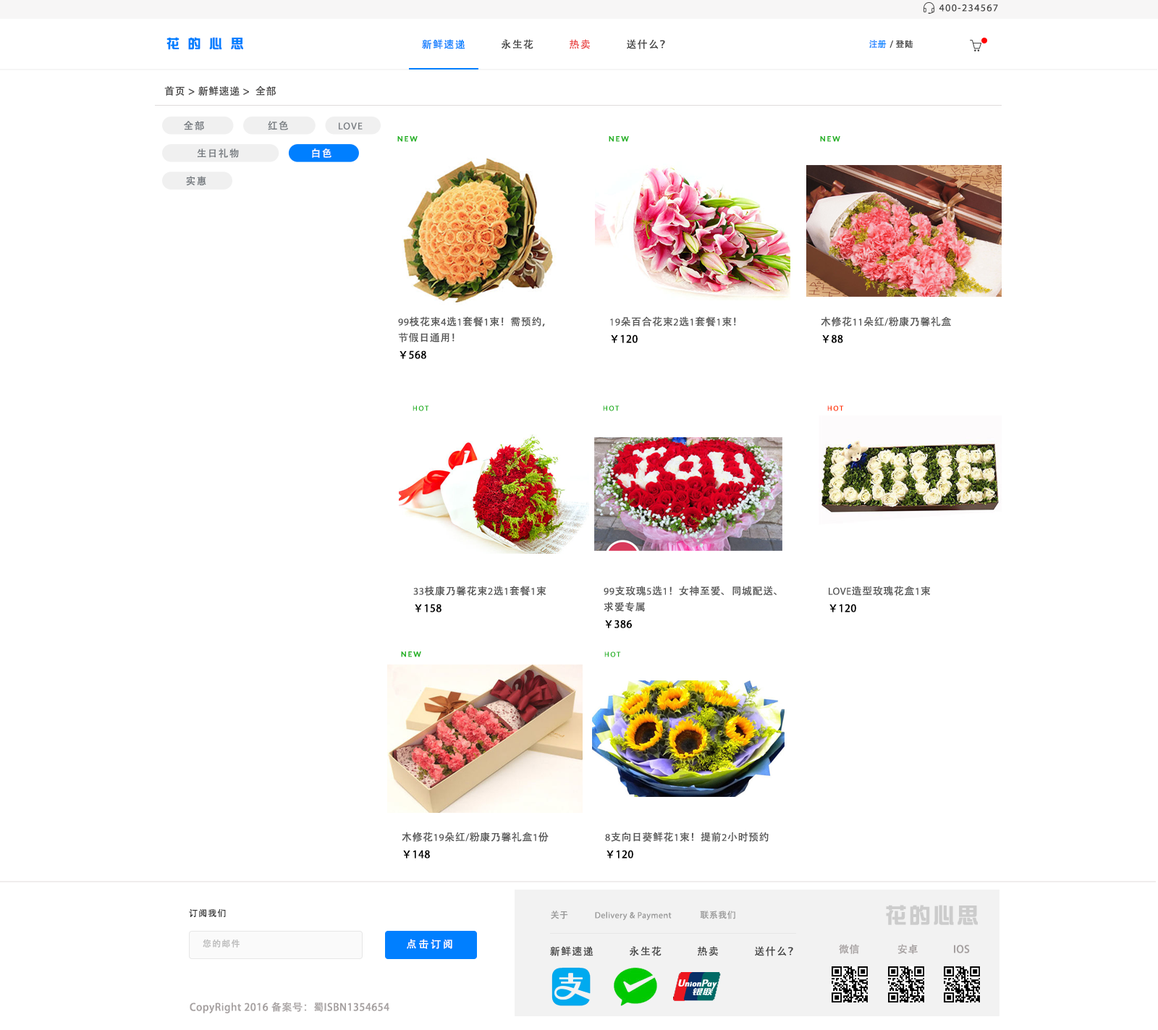
<style>
.page{position:relative;width:1158px;height:1030px;background:#ffffff}
.page>*{position:absolute;margin:0}
.t1{font:10.1px "MyriadPro-Regular";letter-spacing:0.1em;color:#444444}
.t2{font:13px "DFZongYi-Bd-80-Win-GB";letter-spacing:0.64em;color:#007fff}
.t3{font:10.1px "AdobeHeitiStd-Regular";letter-spacing:0.1em;color:#007fff}
.t4{font:10.1px "AdobeHeitiStd-Regular";letter-spacing:0.1em;color:#444444}
.t5{font:10.1px "AdobeHeitiStd-Regular";letter-spacing:0.1em;color:#eb4a4a;text-transform:uppercase}
.t6{font:8.7px "AdobeHeitiStd-Regular";letter-spacing:0.04em;color:#444444}
.t7{font:8.7px "AdobeHeitiStd-Regular";color:#007fff}
.t8{font:10.1px "AdobeHeitiStd-Regular";letter-spacing:0.04em;color:#474646}
.t9{font:9.9px "AdobeHeitiStd-Regular";letter-spacing:0.1em;color:#74797e;text-transform:uppercase}
.t10{font:9.9px "AdobeHeitiStd-Regular";letter-spacing:0.1em;color:#757a7f;text-transform:uppercase}
.t11{font:9.9px "MyriadPro-Regular";letter-spacing:0.1em;color:#757a7f;text-transform:uppercase}
.t12{font:7.2px "Lato-Bold";letter-spacing:0.2em;color:#21b221}
.t13{font:9.9px "AdobeHeitiStd-Regular";letter-spacing:0.1em;color:#fbfcfd;text-transform:uppercase}
.t14{font:10.1px/15.9px "AdobeHeitiStd-Regular";letter-spacing:0.04em;color:#555555}
.t15{font:10.1px/15.9px "MyriadPro-Regular";letter-spacing:0.04em;color:#555555}
.t16{font:10.1px/17.4px "AdobeHeitiStd-Regular";letter-spacing:0.04em;color:#000000}
.t17{font:7.2px "MyriadPro-Regular";letter-spacing:0.2em;color:#21b221}
.t18{font:7.2px "MyriadPro-Regular";letter-spacing:0.2em;color:#ff3300}
.t19{font:21.7px "DFZongYi-Bd-80-Win-GB";letter-spacing:0.1em;color:#cccccc}
.t20{font:8.7px "AdobeHeitiStd-Regular";letter-spacing:0.1em;color:#333333;text-transform:uppercase}
.t21{font:8.7px "MyriadPro-Regular";letter-spacing:0.04em;color:#999999}
.t22{font:8.7px "AdobeHeitiStd-Regular";letter-spacing:0.04em;color:#999999}
.t23{font:8.7px "AdobeHeitiStd-Regular";letter-spacing:0.1em;color:#bbbbbb}
.t24{font:10.1px "AdobeHeitiStd-Regular";letter-spacing:0.2em;color:#ffffff;text-transform:uppercase}
.t25{font:10.1px "AdobeHeitiStd-Regular";letter-spacing:0.04em;color:#a5a0a0}
</style>
<div class="page">
<p class="t1" style="left:939px;top:4px;width:59px;height:8px">400-234567</p>
<p class="t2" style="left:166px;top:37px;width:77px;height:13px">花的心思</p>
<p class="t3" style="left:422px;top:39px;width:243px;height:10px">新鲜速递           <span class="t4">永生花           </span><span class="t5">热卖           </span><span class="t4">送什么？</span></p>
<p class="t6" style="left:869px;top:40px;width:44px;height:8px"><span class="t7">注册 </span>/ 登陆</p>
<p class="t8" style="left:164px;top:86px;width:112px;height:10px">首页 &gt; 新鲜速递 &gt;  全部</p>
<p class="t9" style="left:184px;top:121px;width:20px;height:9px">全部</p>
<p class="t10" style="left:268px;top:121px;width:20px;height:9px">红色</p>
<p class="t11" style="left:339px;top:122px;width:24px;height:8px">LOVE</p>
<p class="t12" style="left:397px;top:136px;width:21px;height:6px">NEW</p>
<p class="t12" style="left:609px;top:136px;width:20px;height:6px">NEW</p>
<p class="t12" style="left:820px;top:136px;width:20px;height:6px">NEW</p>
<p class="t10" style="left:197px;top:148px;width:42px;height:10px">生日礼物</p>
<p class="t13" style="left:312px;top:148px;width:19px;height:10px">白色</p>
<p class="t10" style="left:186px;top:176px;width:20px;height:10px">实惠</p>
<p class="t14" style="left:398px;top:316px;width:147px;height:43px"><span class="t15">99</span>枝花束<span class="t15">4</span>选<span class="t15">1</span>套餐<span class="t15">1</span>束！需预约，<br>节假日通用！<br><span class="t16">￥568</span></p>
<p class="t14" style="left:610px;top:316px;width:126px;height:27px"><span class="t15">19</span>朵百合花束<span class="t15">2</span>选<span class="t15">1</span>套餐<span class="t15">1</span>束！<br><span class="t16">￥120</span></p>
<p class="t14" style="left:821px;top:316px;width:130px;height:27px">木修花<span class="t15">11</span>朵红<span class="t15">/</span>粉康乃馨礼盒<br><span class="t16">￥88</span></p>
<p class="t17" style="left:413px;top:405px;width:16px;height:6px">HOT</p>
<p class="t17" style="left:603px;top:405px;width:16px;height:6px">HOT</p>
<p class="t18" style="left:827px;top:405px;width:17px;height:6px">HOT</p>
<p class="t14" style="left:413px;top:585px;width:133px;height:27px"><span class="t15">33</span>枝康乃馨花束<span class="t15">2</span>选<span class="t15">1</span>套餐<span class="t15">1</span>束<br><span class="t16">￥158</span></p>
<p class="t14" style="left:604px;top:585px;width:173px;height:43px"><span class="t15">99</span>支玫瑰<span class="t15">5</span>选<span class="t15">1</span>！女神至爱、同城配送、<br>求爱专属<br><span class="t16">￥386</span></p>
<p class="t14" style="left:829px;top:585px;width:102px;height:27px"><span class="t15">LOVE</span>造型玫瑰花盒<span class="t15">1</span>束<br><span class="t16">￥120</span></p>
<p class="t12" style="left:401px;top:651px;width:20px;height:6px">NEW</p>
<p class="t17" style="left:604px;top:651px;width:17px;height:6px">HOT</p>
<p class="t14" style="left:402px;top:832px;width:147px;height:26px">木修花<span class="t15">19</span>朵红<span class="t15">/</span>粉康乃馨礼盒<span class="t15">1</span>份<br><span class="t16">￥148</span></p>
<p class="t14" style="left:605px;top:832px;width:164px;height:26px"><span class="t15">8</span>支向日葵鲜花<span class="t15">1</span>束！提前<span class="t15">2</span>小时预约<br><span class="t16">￥120</span></p>
<p class="t19" style="left:886px;top:905px;width:92px;height:20px">花的心思</p>
<p class="t20" style="left:189px;top:909px;width:37px;height:8px">订阅我们</p>
<p class="t21" style="left:551px;top:910px;width:184px;height:11px"><span class="t22">关于</span>            Delivery &amp; Payment             <span class="t22">联系我们</span></p>
<p class="t23" style="left:203px;top:939px;width:37px;height:9px">您的邮件</p>
<p class="t24" style="left:407px;top:939px;width:45px;height:10px">点击订阅</p>
<p class="t4" style="left:550px;top:946px;width:243px;height:10px">新鲜速递           永生花           热卖           送什么？</p>
<p class="t25" style="left:839px;top:944px;width:131px;height:10px">微信              安卓             IOS</p>
<p class="t25" style="left:190px;top:1002px;width:199px;height:11px">CopyRight 2016 备案号：蜀ISBN1354654</p>
</div>
